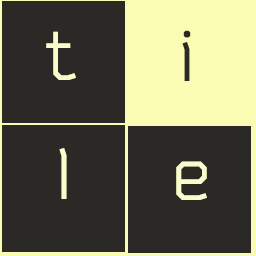
<style>
.page{position:relative;width:256px;height:256px;background:#2a2926}
.page>*{position:absolute;margin:0}
.t1{font:72px "Bender";color:#2a2826}
.t2{font:72px "Bender";color:#fafdc9}
</style>
<div class="page">
<p class="t1" style="left:182px;top:30px;width:9px;height:51px">i</p>
<p class="t2" style="left:46px;top:31px;width:30px;height:49px">t</p>
<p class="t2" style="left:59px;top:148px;width:8px;height:51px">l</p>
<p class="t2" style="left:176px;top:161px;width:31px;height:39px">e</p>
</div>
